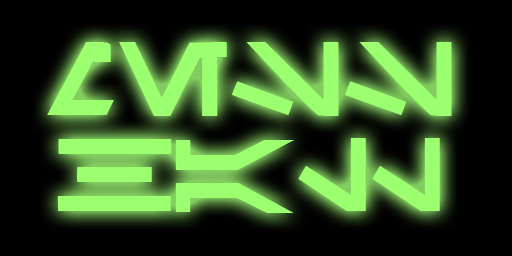
<style>
.page{position:relative;width:512px;height:256px;background:#000000}
.page>*{position:absolute;margin:0}
.t1{font:80px "Aurabesh";color:#9bff6f}
</style>
<div class="page">
<p class="t1" style="left:47px;top:42px;width:405px;height:171px;text-align:center">MESS<br>HALL</p>
</div>
